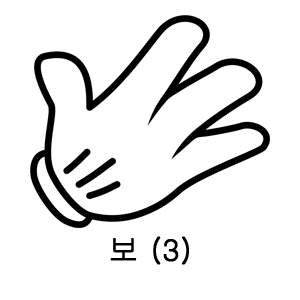
<style>
.page{position:relative;width:300px;height:300px;background:#ffffff}
.page>*{position:absolute;margin:0}
.t1{font:30px "Gulim";color:#000000;font-weight:bold}
</style>
<div class="page">
<p class="t1" style="left:110px;top:236px;width:79px;height:29px">보 (3)</p>
</div>
